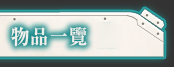
<style>
.page{position:relative;width:174px;height:67px}
.page>*{position:absolute;margin:0}
.t1{font:20px "RyuminPr6N-ExBold";letter-spacing:0.075em;color:#efefeb;scale:0.9 1}
</style>
<div class="page">
<p class="t1" style="left:11px;top:26px;width:76px;height:21px">物品一覽</p>
</div>
